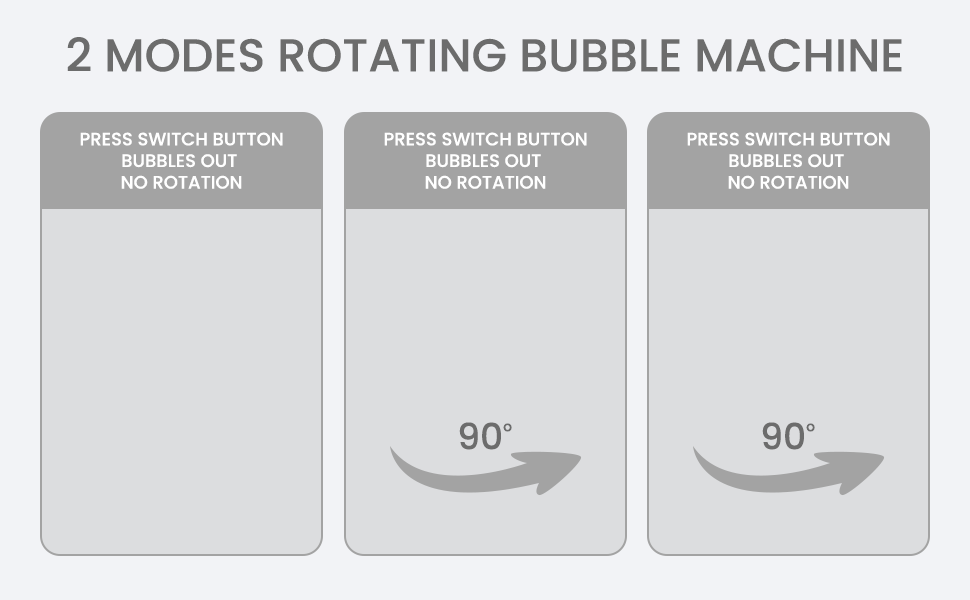
<style>
.page{position:relative;width:970px;height:600px;background:#dcdddf}
.page>*{position:absolute;margin:0}
.t1{font:46px "Poppins-Medium";color:#6c6c6c;text-transform:uppercase}
.t2{font:18px "Poppins-Medium";color:#ffffff}
.t3{font:36px "Poppins-Medium";color:#6c6c6c}
.t4{font:14px "Poppins-Medium";color:#6c6c6c}
</style>
<div class="page">
<p class="t1" style="left:67px;top:37px;width:835px;height:35px">2 MODES ROTATING BUBBLE MACHINE</p>
<p class="t2" style="left:80px;top:132px;width:203px;height:57px;text-align:center">PRESS SWITCH BUTTON<br>BUBBLES OUT <br>NO ROTATION</p>
<p class="t2" style="left:384px;top:132px;width:203px;height:57px;text-align:center">PRESS SWITCH BUTTON<br>BUBBLES OUT <br>NO ROTATION</p>
<p class="t2" style="left:687px;top:132px;width:203px;height:57px;text-align:center">PRESS SWITCH BUTTON<br>BUBBLES OUT <br>NO ROTATION</p>
<p class="t3" style="left:459px;top:422px;width:53px;height:28px">90<span class="t4">o</span></p>
<p class="t3" style="left:762px;top:422px;width:53px;height:28px">90<span class="t4">o</span></p>
</div>
